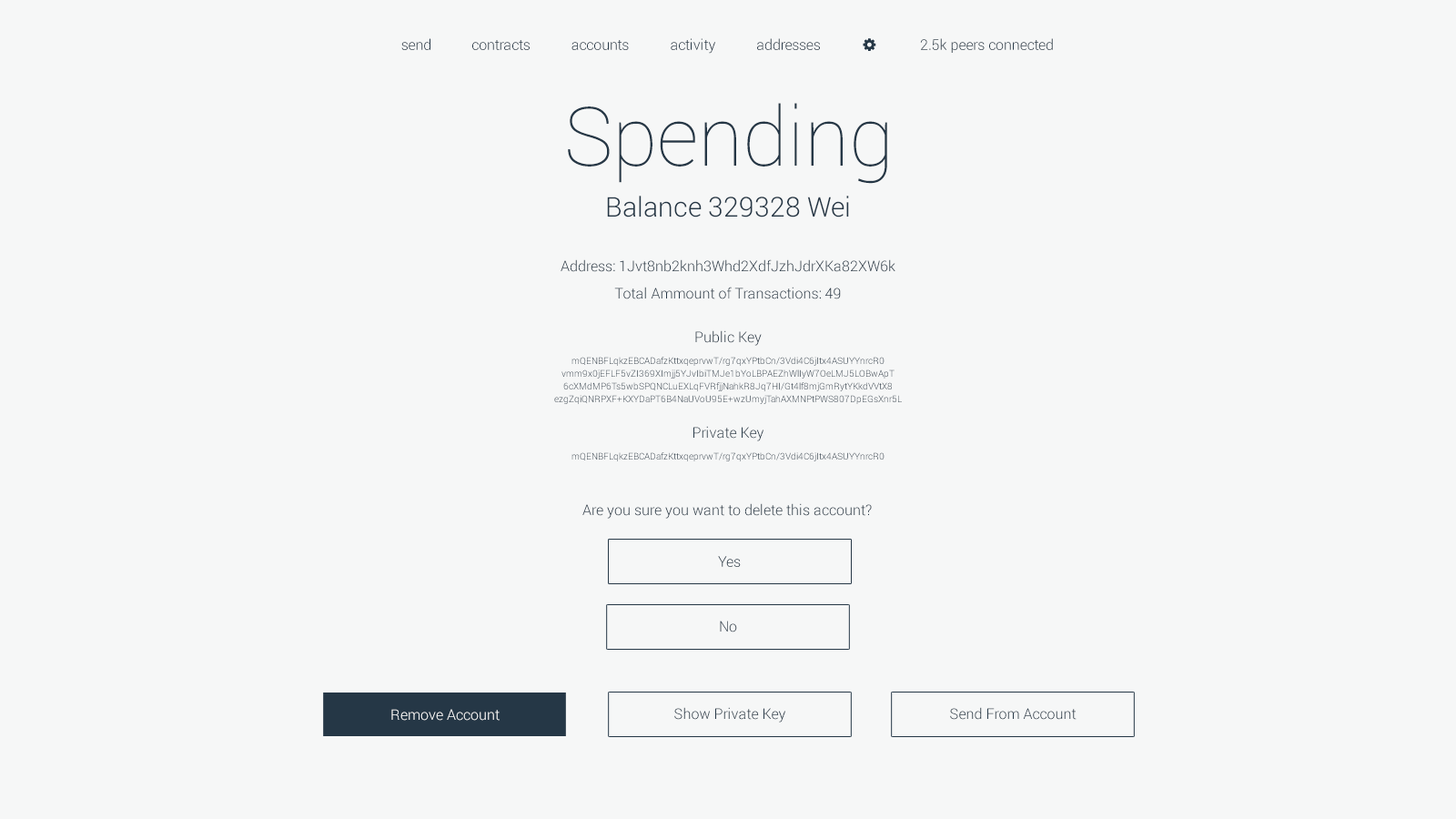
<style>
.page{position:relative;width:1456px;height:819px;background:#f6f7f7}
.page>*{position:absolute;margin:0}
.t1{font:14.6px "Roboto-Light";color:#253746}
.t2{font:81.9px "Roboto-Thin";color:#253746}
.t3{font:27.3px "Roboto-Light";color:#253746}
.t4{font:9.1px/12.7px "Roboto-Light";color:#253746}
.t5{font:14.6px/27.3px "Roboto-Light";color:#253746}
.t6{font:14.6px/21.8px "Roboto-Light";color:#253746}
.t7{font:14.6px "Roboto-Light"}
.t8{font:14.6px "Roboto-Light";color:#ffffff}
</style>
<div class="page">
<p class="t1" style="left:401px;top:38px;width:29px;height:12px">send</p>
<p class="t1" style="left:472px;top:40px;width:58px;height:10px">contracts</p>
<p class="t1" style="left:571px;top:40px;width:58px;height:10px">accounts</p>
<p class="t1" style="left:671px;top:38px;width:44px;height:16px">activity</p>
<p class="t1" style="left:757px;top:38px;width:63px;height:12px">addresses</p>
<p class="t1" style="left:920px;top:38px;width:133px;height:15px">2.5k peers connected</p>
<p class="t2" style="left:568px;top:103px;width:319px;height:81px">Spending</p>
<p class="t3" style="left:607px;top:196px;width:242px;height:21px">Balance 329328 Wei</p>
<p class="t4" style="left:554px;top:259px;width:348px;height:145px;text-align:center"><span class="t5">Address: 1Jvt8nb2knh3Whd2XdfJzhJdrXKa82XW6k<br>Total Ammount of Transactions: 49<br><br></span><span class="t6">Public Key<br><br></span>mQENBFLqkzEBCADafzKttxqeprvwT/rg7qxYPtbCn/3Vdi4C6jItx4ASUYYnrcR0<br>vmm9x0jEFLF5vZI369XImjj5YJvIbiTMJe1bYoLBPAEZhWlIyW7OeLMJ5LOBwApT<br>6cXMdMP6Ts5wbSPQNCLuEXLqFVRfjjNahkR8Jq7HI/Gt4lf8mjGmRytYKkdVVtX8<br>ezgZqiQNRPXF+KXYDaPT6B4NaUVoU95E+wzUmyjTahAXMNPtPWS807DpEGsXnr5L</p>
<p class="t4" style="left:571px;top:426px;width:314px;height:35px;text-align:center"><span class="t6">Private Key<br><br></span>mQENBFLqkzEBCADafzKttxqeprvwT/rg7qxYPtbCn/3Vdi4C6jItx4ASUYYnrcR0</p>
<p class="t1" style="left:582px;top:503px;width:290px;height:16px">Are you sure you want to delete this account?</p>
<p class="t7" style="left:718px;top:556px;width:23px;height:11px">Yes</p>
<p class="t7" style="left:720px;top:621px;width:17px;height:11px">No</p>
<p class="t8" style="left:391px;top:709px;width:109px;height:12px">Remove Account</p>
<p class="t1" style="left:674px;top:707px;width:111px;height:16px">Show Private Key</p>
<p class="t1" style="left:950px;top:707px;width:127px;height:13px">Send From Account</p>
</div>
